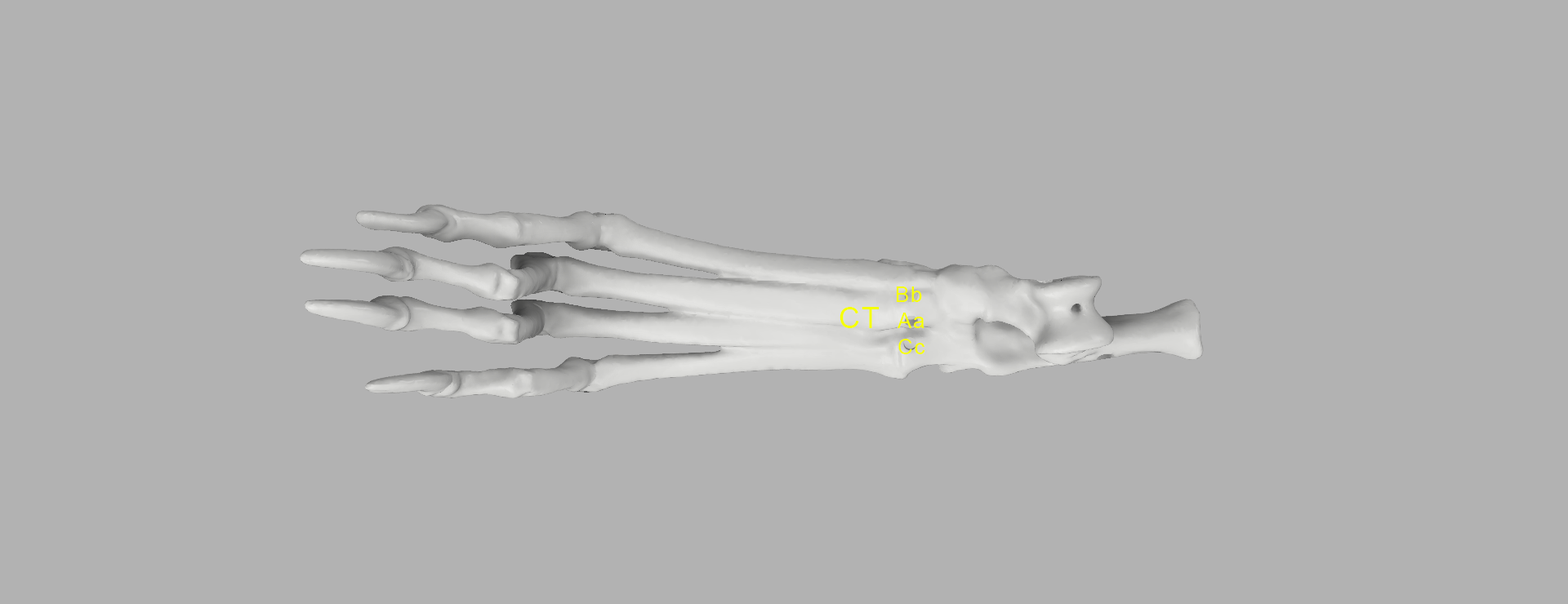
<style>
.page{position:relative;width:1568px;height:604px;background:#b2b2b2}
.page>*{position:absolute;margin:0}
.t1{font:21.2px "ArialMT";letter-spacing:0.06em;color:#f6ff00}
.t2{font:29.4px "ArialMT";letter-spacing:0.06em;color:#f6ff00}
</style>
<div class="page">
<p class="t1" style="left:897px;top:287px;width:25px;height:15px">Bb</p>
<p class="t2" style="left:840px;top:307px;width:40px;height:21px">CT</p>
<p class="t1" style="left:898px;top:313px;width:26px;height:15px">Aa</p>
<p class="t1" style="left:898px;top:339px;width:27px;height:15px">Cc</p>
</div>
